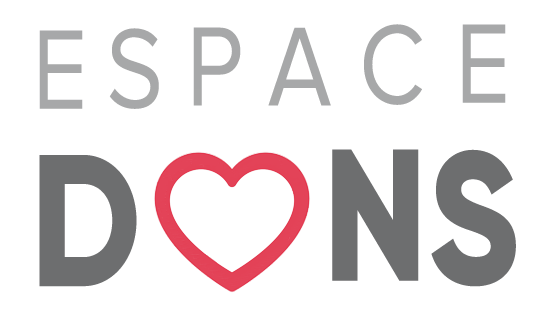
<style>
.page{position:relative;width:534px;height:310px;background:#ffffff}
.page>*{position:absolute;margin:0}
.t1{font:116.7px "ProximaNova-Regular";letter-spacing:0.025em;color:#a7a8a9;scale:0.83 1}
.t2{font:187.1px "Gilroy-ExtraBold";letter-spacing:0.025em;color:#6d6e6f;scale:0.83 1}
</style>
<div class="page">
<p class="t1" style="left:39px;top:30px;width:44px;height:79px">E</p>
<p class="t1" style="left:109px;top:28px;width:50px;height:81px">S</p>
<p class="t1" style="left:193px;top:27px;width:48px;height:79px">P</p>
<p class="t1" style="left:268px;top:27px;width:63px;height:79px">A</p>
<p class="t1" style="left:364px;top:24px;width:58px;height:81px">C</p>
<p class="t1" style="left:462px;top:24px;width:44px;height:79px">E</p>
<p class="t2" style="left:332px;top:149px;width:87px;height:132px">N</p>
<p class="t2" style="left:431px;top:149px;width:85px;height:138px">S</p>
<p class="t2" style="left:39px;top:155px;width:98px;height:132px">D</p>
</div>
